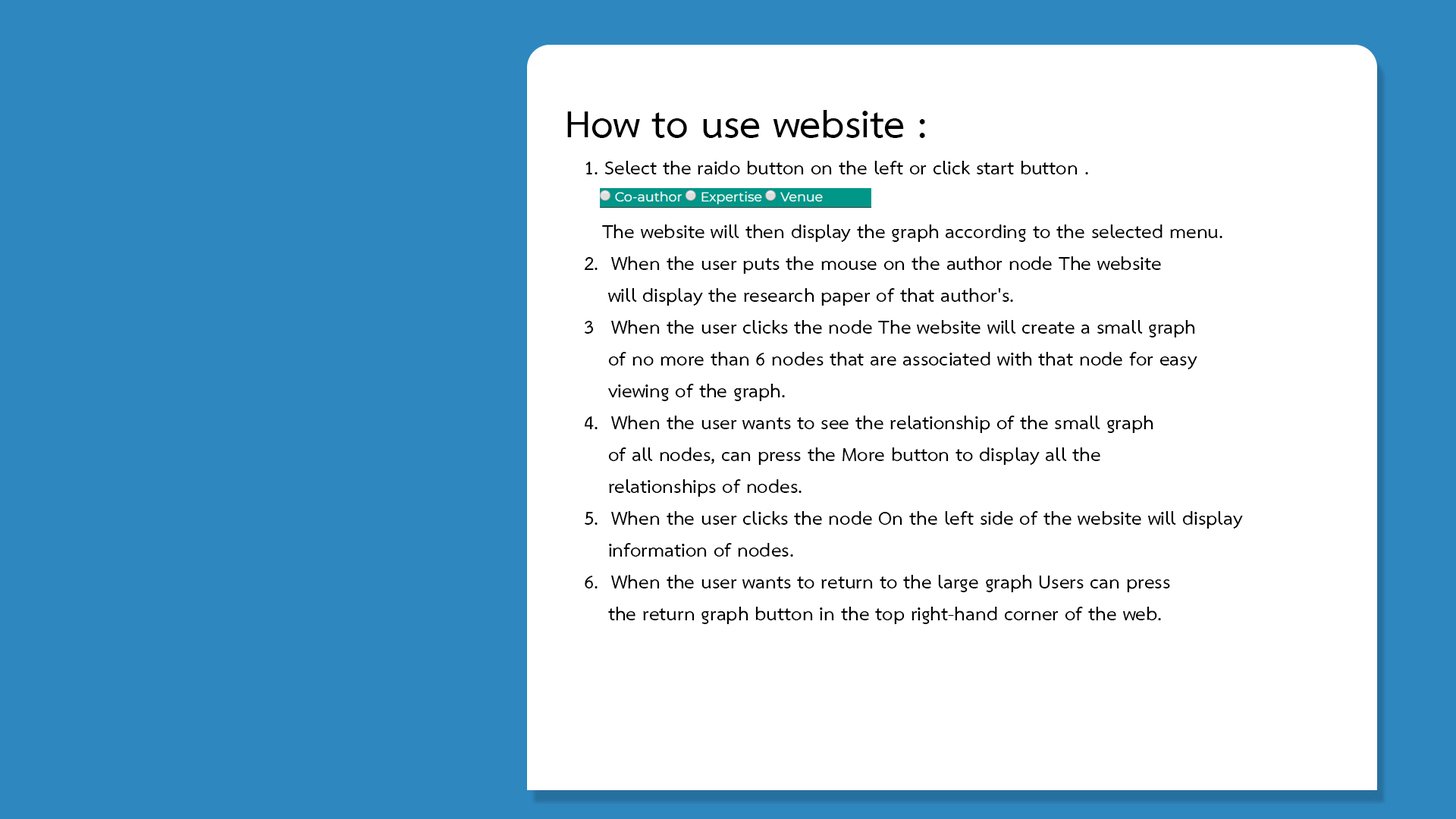
<style>
.page{position:relative;width:1456px;height:819px;background:#ffffff}
.page>*{position:absolute;margin:0}
.t1{font:54.6px "THSarabunPSK-Bold";color:#000000}
.t2{font:26.5px "THSarabunPSK-Bold";color:#000000}
</style>
<div class="page">
<p class="t1" style="left:567px;top:110px;width:358px;height:28px">How to use website :</p>
<p class="t2" style="left:584px;top:161px;width:659px;height:463px">1. Select the raido button on the left or click start button .<br><br>   The website will then display the graph according to the selected menu.<br>2. When the user puts the mouse on the author node The website<br>    will display the research paper of that author's.<br>3 When the user clicks the node The website will create a small graph <br>    of no more than 6 nodes that are associated with that node for easy <br>    viewing of the graph.<br>4. When the user wants to see the relationship of the small graph <br>    of all nodes, can press the More button to display all the <br>    relationships of nodes.<br>5. When the user clicks the node On the left side of the website will display <br>    information of nodes.<br>6. When the user wants to return to the large graph Users can press<br>    the return graph button in the top right-hand corner of the web.</p>
</div>
